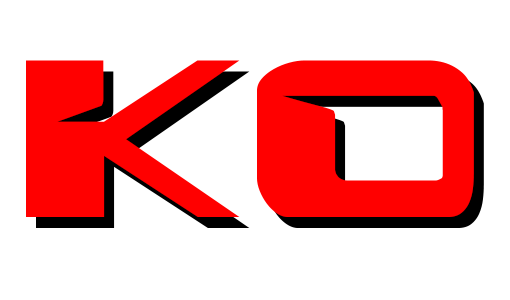
<style>
.page{position:relative;width:510px;height:300px;background:#ffffff}
.page>*{position:absolute;margin:0}
.t1{font:250px "Interdiction";color:#ff0000}
</style>
<div class="page">
<p class="t1" style="left:26px;top:60px;width:448px;height:157px">Ko</p>
<p class="t1" style="left:36px;top:71px;width:448px;height:157px">Ko</p>
</div>
